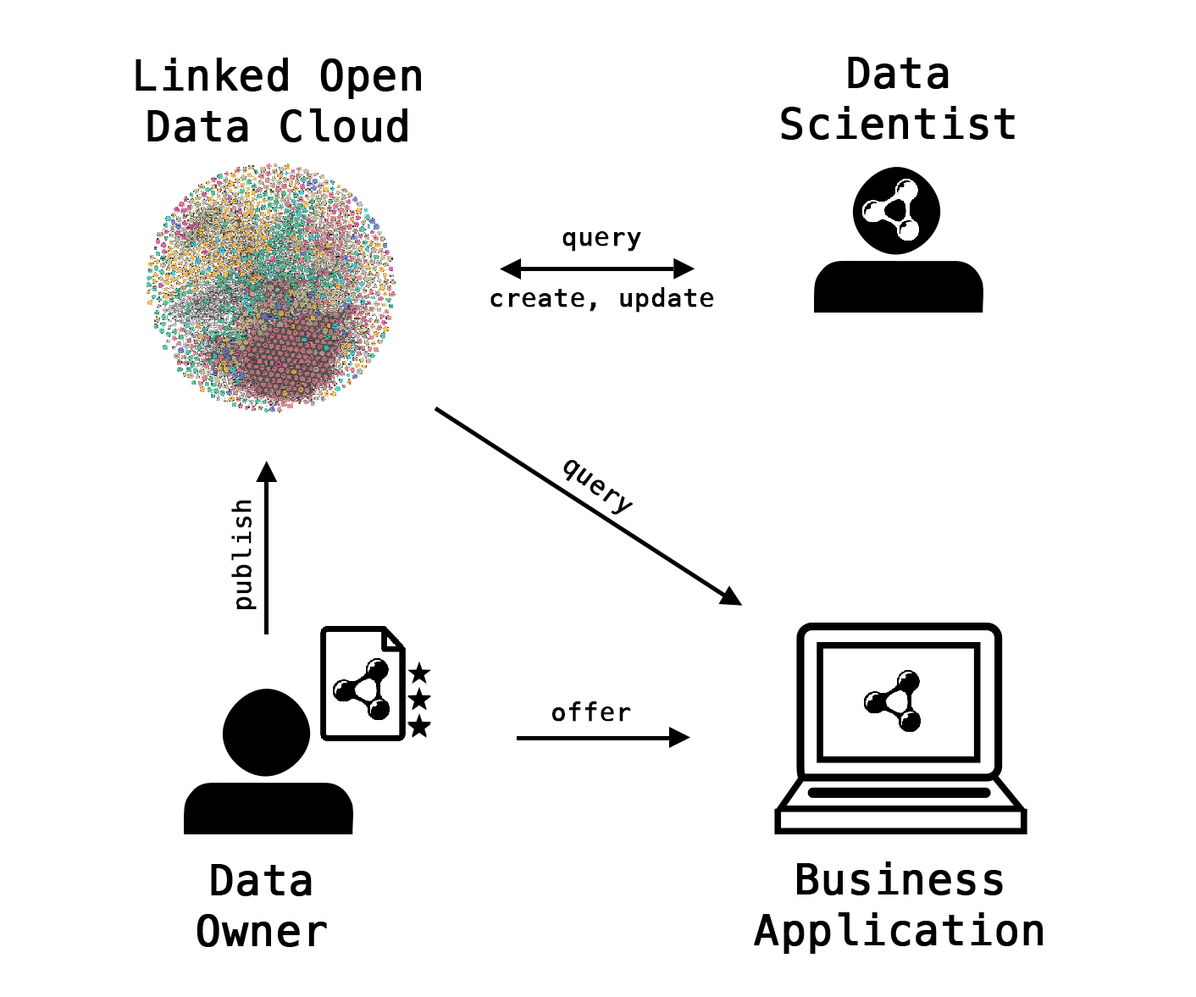
<style>
.page{position:relative;width:1196px;height:997px;background:#ffffff}
.page>*{position:absolute;margin:0}
.t1{font:42.4px "Menlo-Regular";color:#000000;font-weight:bold}
.t2{font:25.4px "Menlo-Regular";color:#000000;font-weight:bold}
</style>
<div class="page">
<p class="t1" style="left:136px;top:58px;width:285px;height:84px;text-align:center">Linked Open<br>Data Cloud</p>
<p class="t1" style="left:781px;top:57px;width:234px;height:83px;text-align:center">Data<br>Scientist</p>
<p class="t2" style="left:490px;top:231px;width:224px;height:82px;text-align:center">query<br><br>create, update</p>
<p class="t2" style="left:563px;top:460px;width:71px;height:55px;rotate:37deg">query</p>
<p class="t2" style="left:231px;top:500px;width:26px;height:110px;rotate:-90deg">publish</p>
<p class="t2" style="left:551px;top:701px;width:80px;height:21px">offer</p>
<p class="t1" style="left:197px;top:864px;width:130px;height:83px;text-align:center">Data<br>Owner</p>
<p class="t1" style="left:754px;top:861px;width:289px;height:93px;text-align:center">Business<br>Application</p>
</div>
